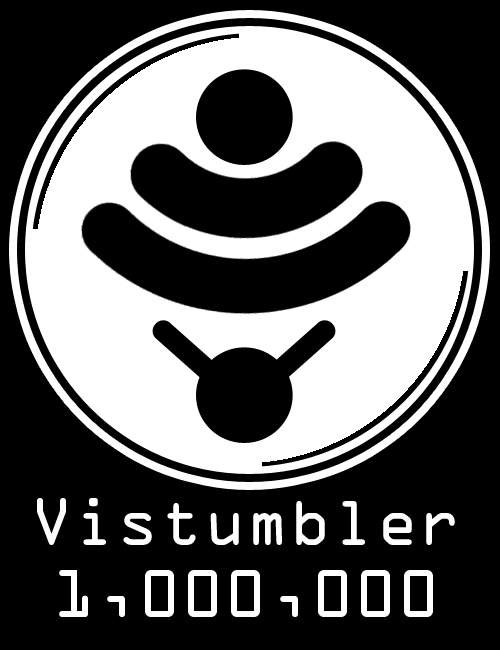
<style>
.page{position:relative;width:500px;height:650px;background:#000000}
.page>*{position:absolute;margin:0}
.t1{font:60px "OCRAStd";color:#ffffff}
</style>
<div class="page">
<p class="t1" style="left:37px;top:498px;width:418px;height:119px;text-align:center">Vistumbler<br>1,000,000</p>
</div>
